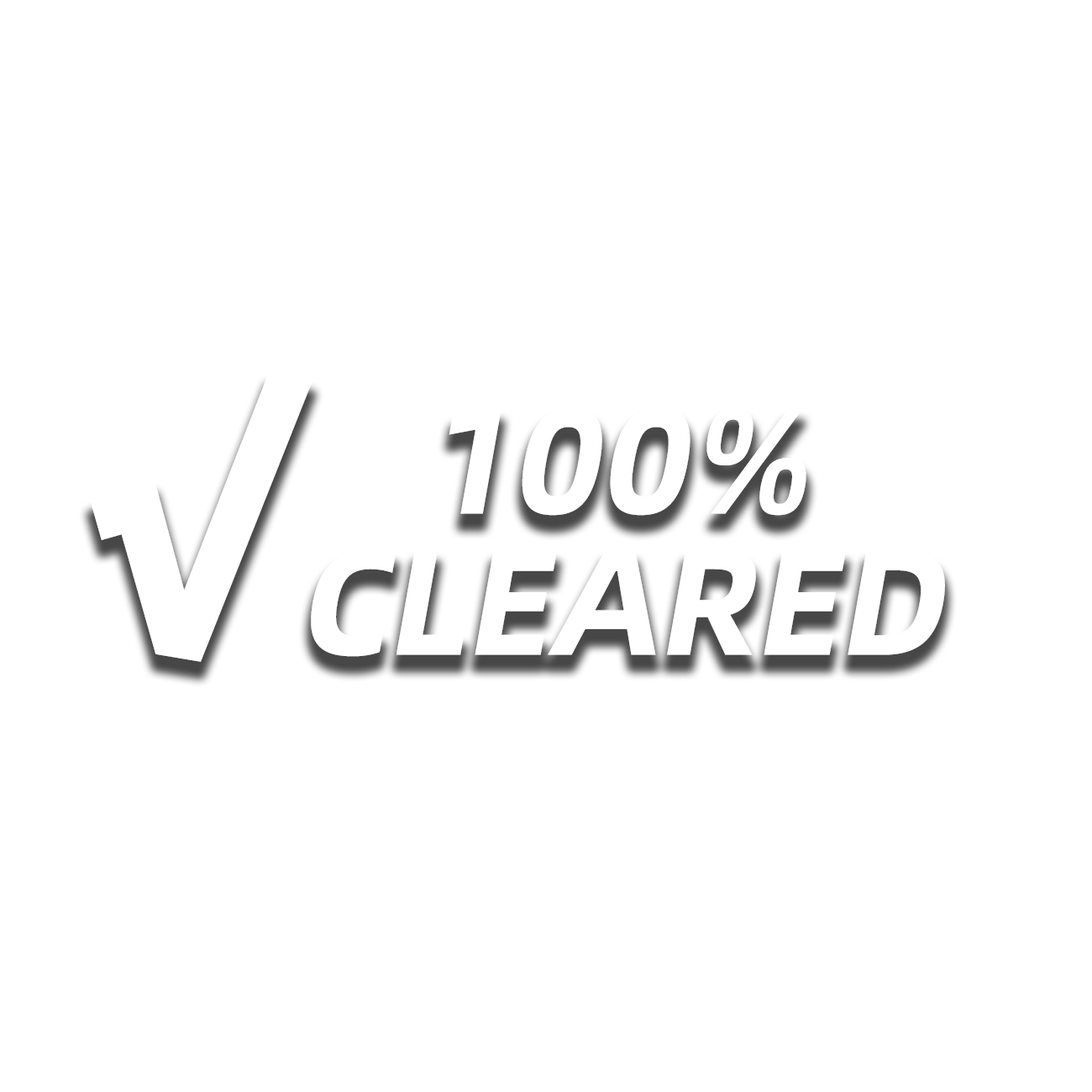
<style>
.page{position:relative;width:1092px;height:1092px;background:#ffffff}
.page>*{position:absolute;margin:0}
.t1{font:149.2px "AlibabaPuHuiTiB";color:#ffffff;font-style:italic}
</style>
<div class="page">
<p class="t1" style="left:449px;top:408px;width:357px;height:108px">100%</p>
<p class="t1" style="left:311px;top:549px;width:634px;height:108px">CLEARED</p>
</div>
